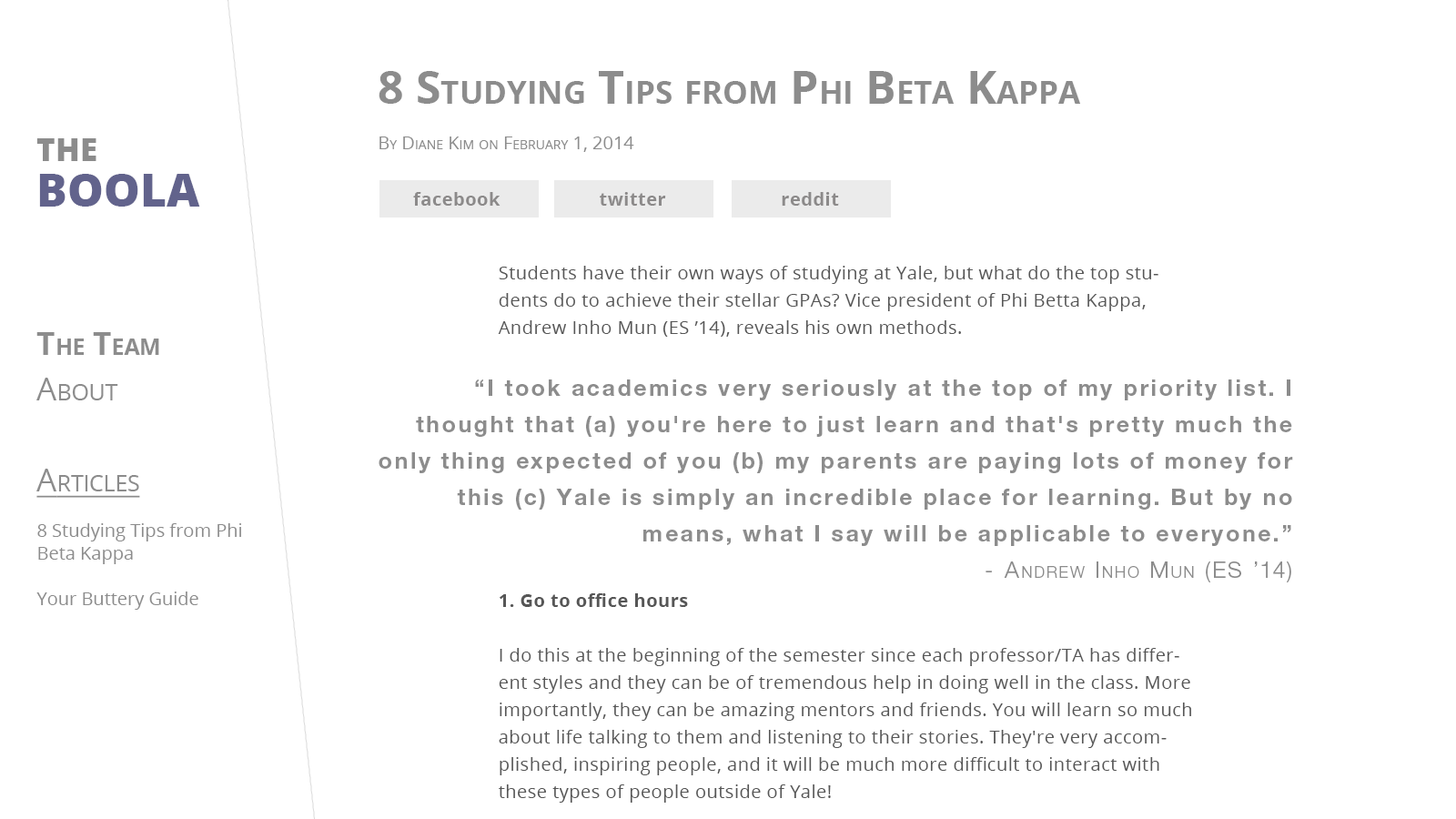
<style>
.page{position:relative;width:1456px;height:819px;background:#ffffff}
.page>*{position:absolute;margin:0}
.t1{font:45.5px/45.5px "OpenSans-Bold";color:#8c8c8c;font-variant:small-caps}
.t2{font:18.2px/45.5px "OpenSans";color:#8c8c8c;font-variant:small-caps}
.t3{font:45.5px/45.5px "OpenSans-Extrabold";color:#62638c;text-transform:uppercase}
.t4{font:31.8px/45.5px "OpenSans-Extrabold";color:#8c8c8c;text-transform:uppercase}
.t5{font:18.2px "OpenSans-Bold";letter-spacing:0.025em;color:#8c8a8a}
.t6{font:18.2px/22.7px "OpenSans";color:#8c8c8c}
.t7{font:31.8px/45.5px "OpenSans-Bold";color:#8c8c8c;font-variant:small-caps}
.t8{font:31.8px/45.5px "OpenSans";color:#8c8c8c;font-variant:small-caps}
.t9{font:31.8px/45.5px "OpenSans";color:#8c8c8c;font-variant:small-caps;text-decoration:underline}
.t10{font:22.7px/36.4px "HelveticaNeueLTPro-Bd";letter-spacing:0.1em;color:#8c8c8c}
.t11{font:22.7px/36.4px "HelveticaNeueLTPro-Lt";letter-spacing:0.1em;color:#8c8c8c;font-variant:small-caps}
</style>
<div class="page">
<p class="t1" style="left:379px;top:71px;width:701px;height:81px">8 Studying Tips from Phi Beta Kappa<br><span class="t2">By Diane Kim on February 1, 2014</span></p>
<p class="t3" style="left:36px;top:138px;width:164px;height:69px"><span class="t4">the<br></span>boola</p>
<p class="t5" style="left:413px;top:192px;width:87px;height:14px">facebook</p>
<p class="t5" style="left:600px;top:192px;width:66px;height:14px">twitter</p>
<p class="t5" style="left:782px;top:192px;width:57px;height:14px">reddit</p>
<p class="t6" style="left:36px;top:332px;width:205px;height:278px"><span class="t7">The Team<br></span><span class="t8">About<br><br></span><span class="t9">Articles<br><br></span>8 Studying Tips from Phi Beta Kappa<br><br>Your Buttery Guide</p>
<p class="t10" style="left:379px;top:379px;width:914px;height:203px;text-align:right">“I took academics very seriously at the top of my priority list. I thought that (a) you're here to just learn and that's pretty much the only thing expected of you (b) my parents are paying lots of money for this (c) Yale is simply an incredible place for learning. But by no means, what I say will be applicable to everyone.”<br><span class="t11">- Andrew Inho Mun (ES ’14)</span></p>
</div>
